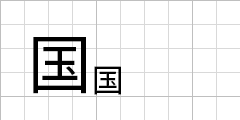
<style>
.page{position:relative;width:240px;height:120px;background:#ffffff}
.page>*{position:absolute;margin:0}
.t1{font:64px "NotoSansCJKjp-Regular";color:#000000}
.t2{font:32px "NotoSansCJKjp-Regular";color:#000000}
</style>
<div class="page">
<p class="t1" style="left:33px;top:37px;width:88px;height:58px">国<span class="t2">国</span></p>
</div>
